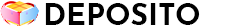
<style>
.page{position:relative;width:244px;height:27px;background:#ffffff}
.page>*{position:absolute;margin:0}
.t1{font:30px "JosefinSans-Bold";color:#000000;text-transform:uppercase}
</style>
<div class="page">
<p class="t1" style="left:45px;top:3px;width:155px;height:22px">Deposito</p>
</div>
